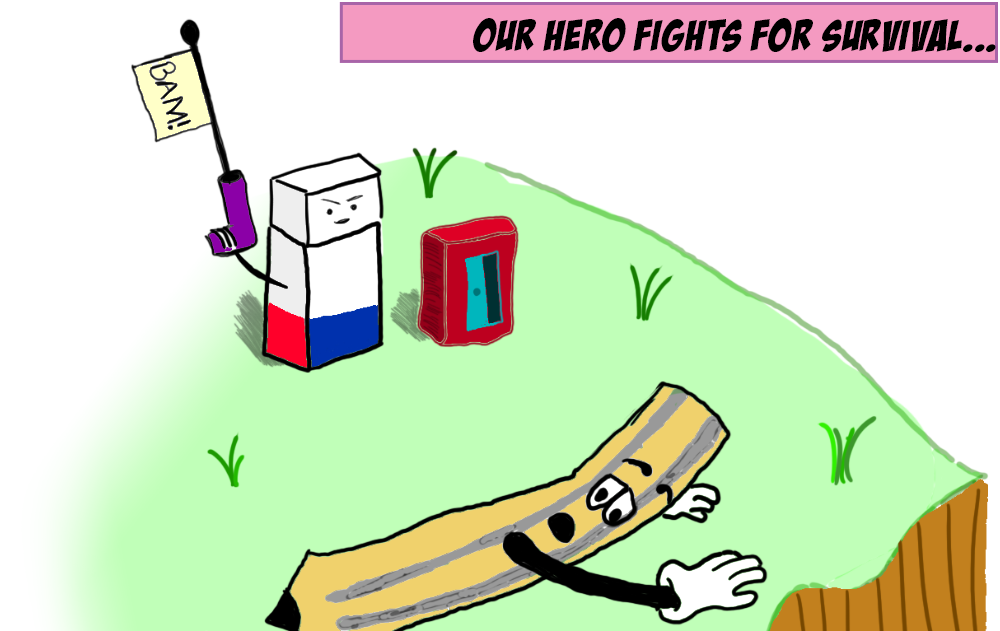
<style>
.page{position:relative;width:1000px;height:631px;background:#ffffff}
.page>*{position:absolute;margin:0}
.t1{font:44.6px "BadaBoomBB";color:#000000;text-transform:uppercase}
</style>
<div class="page">
<p class="t1" style="left:473px;top:18px;width:523px;height:34px">Our hero fights for survival...</p>
</div>
